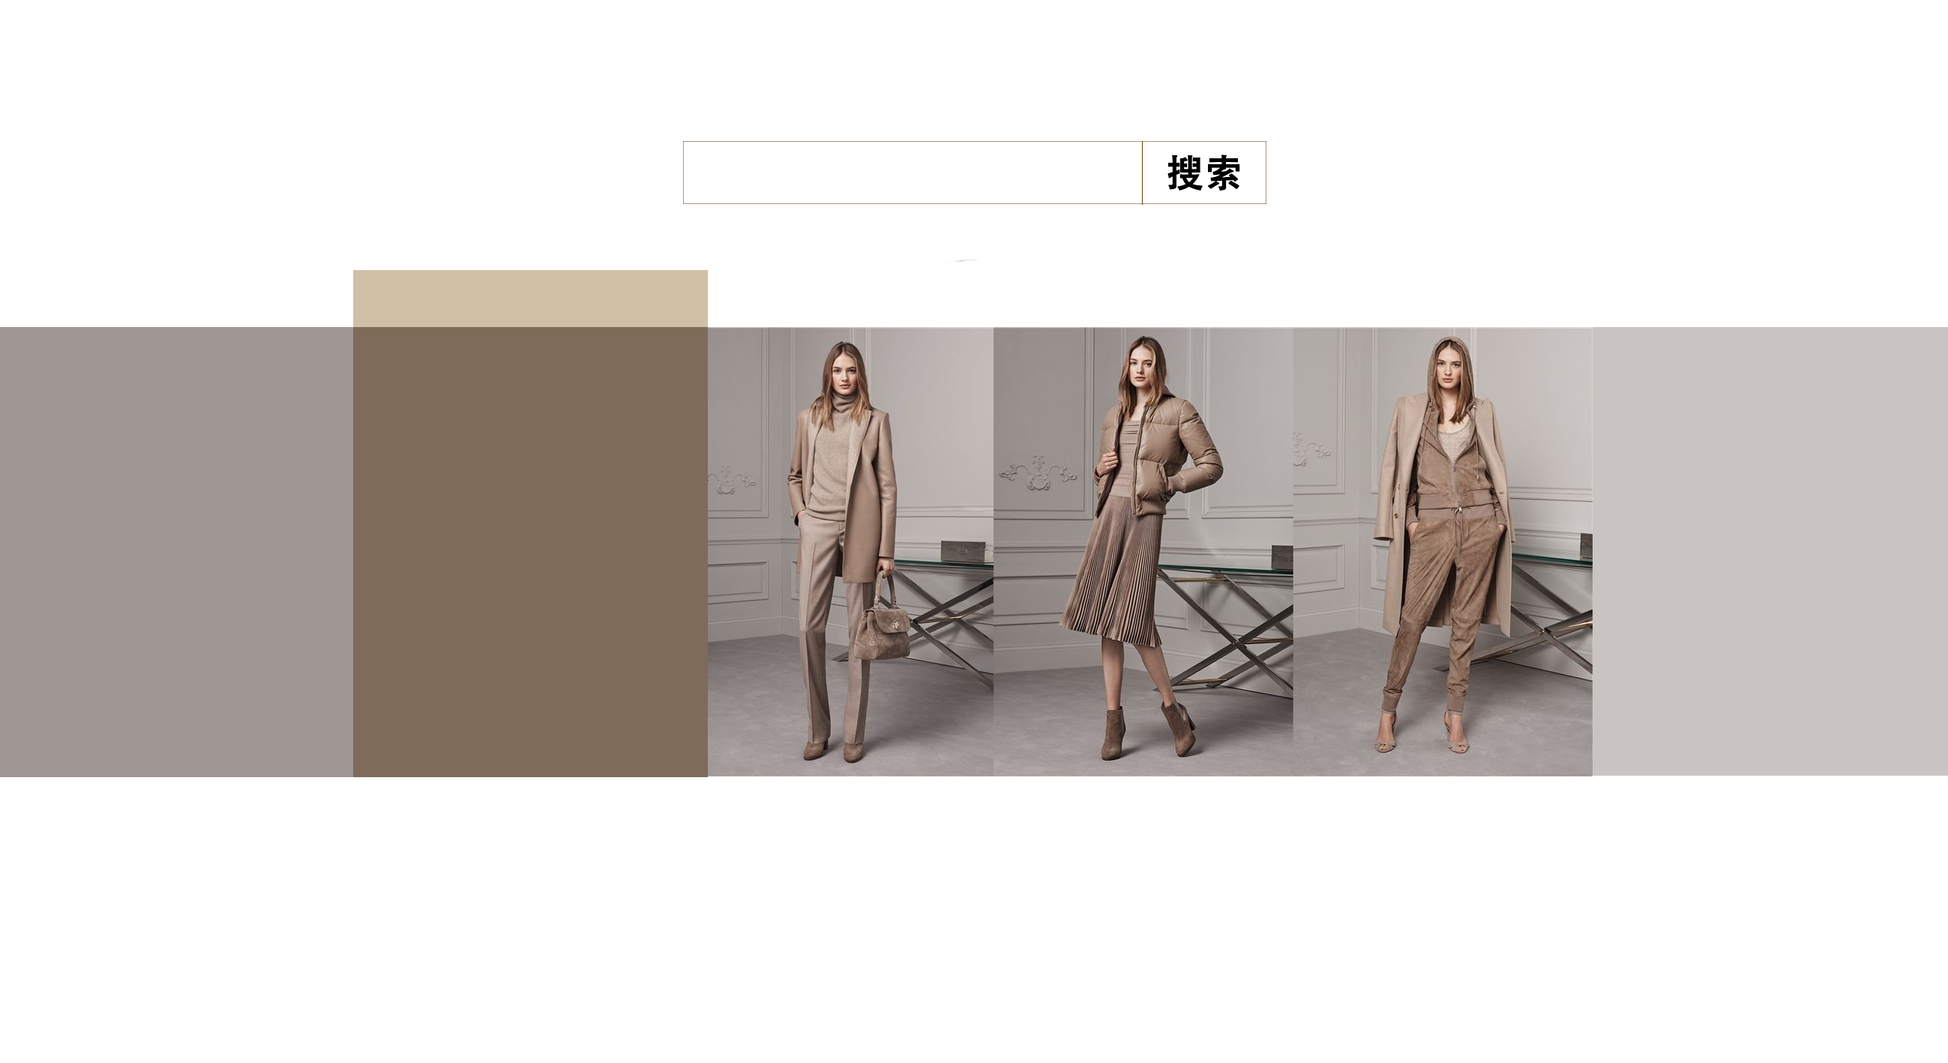
<style>
.page{position:relative;width:1948px;height:1063px;background:#ffffff}
.page>*{position:absolute;margin:0}
.t1{font:9px "AdobeHeitiStd-Regular";color:#000000;font-weight:bold}
</style>
<div class="page">
<p class="t1" style="left:1168px;top:154px;width:72px;height:37px">搜索</p>
</div>
